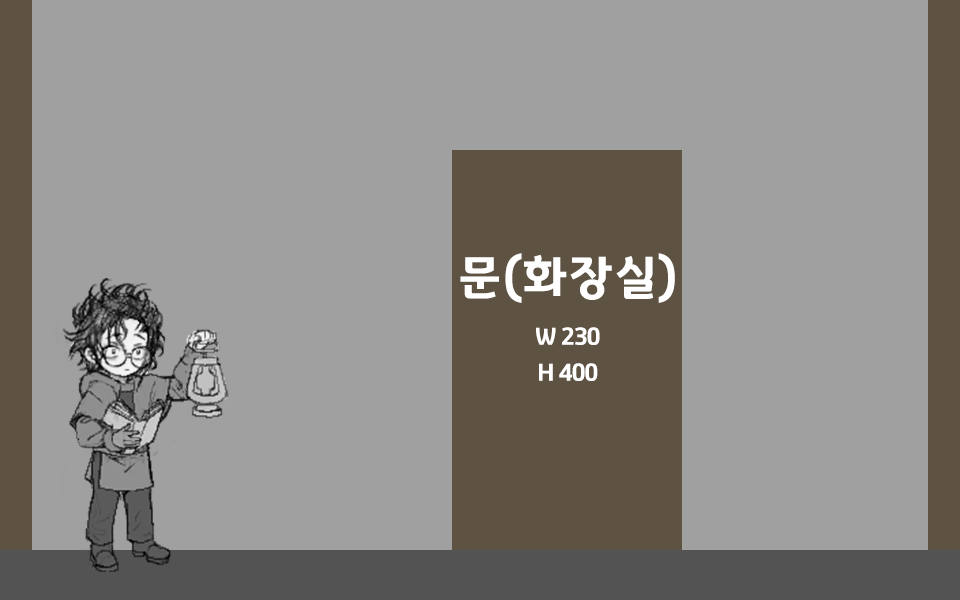
<style>
.page{position:relative;width:960px;height:600px;background:#a0a0a0}
.page>*{position:absolute;margin:0}
.t1{font:24px/36px "GyeonggiTitleV";letter-spacing:-0.05em;color:#ffffff}
.t2{font:48px/36px "GyeonggiTitleV";letter-spacing:-0.05em;color:#ffffff}
</style>
<div class="page">
<p class="t1" style="left:460px;top:253px;width:215px;height:128px;text-align:center"><span class="t2">문(화장실)<br><br></span>W 230<br>H 400</p>
</div>
